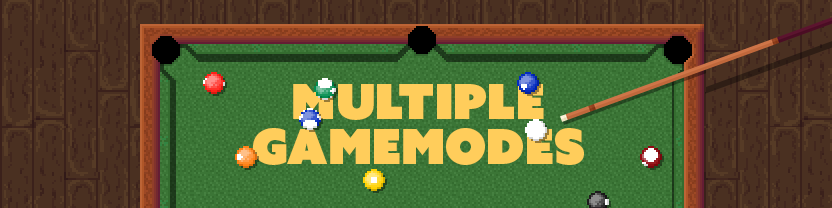
<style>
.page{position:relative;width:832px;height:208px;background:#4a3021}
.page>*{position:absolute;margin:0}
.t1{font:48px/9px "AzoSansUber-Regular";color:#ffcd5b}
</style>
<div class="page">
<p class="t1" style="left:253px;top:84px;width:331px;height:81px;text-align:center">Multiple<br><br><br><br><br>Gamemodes</p>
</div>
